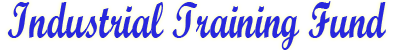
<style>
.page{position:relative;width:400px;height:50px;background:#ffffff}
.page>*{position:absolute;margin:0}
.t1{font:50px "ScriptMTBold";color:#2828dd;scale:0.73 1}
</style>
<div class="page">
<p class="t1" style="left:7px;top:1px;width:379px;height:49px">Industrial Training Fund</p>
</div>
